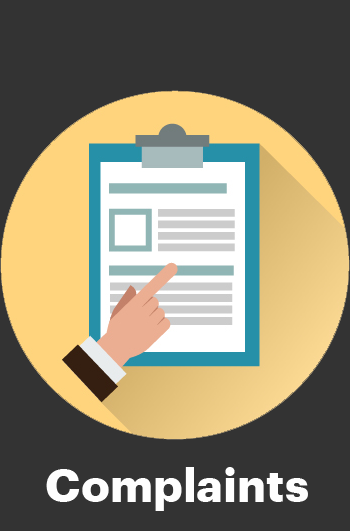
<style>
.page{position:relative;width:350px;height:531px;background:#333333}
.page>*{position:absolute;margin:0}
.t1{font:45.8px "Graphik-Bold";color:#fefefe}
</style>
<div class="page">
<p class="t1" style="left:46px;top:467px;width:262px;height:44px">Complaints</p>
</div>
